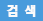
<style>
.page{position:relative;width:43px;height:21px;background:#489bdc}
.page>*{position:absolute;margin:0}
.t1{font:12px "HeadlineR-HM";color:#fafafa}
</style>
<div class="page">
<p class="t1" style="left:6px;top:5px;width:30px;height:12px">검 색</p>
</div>
